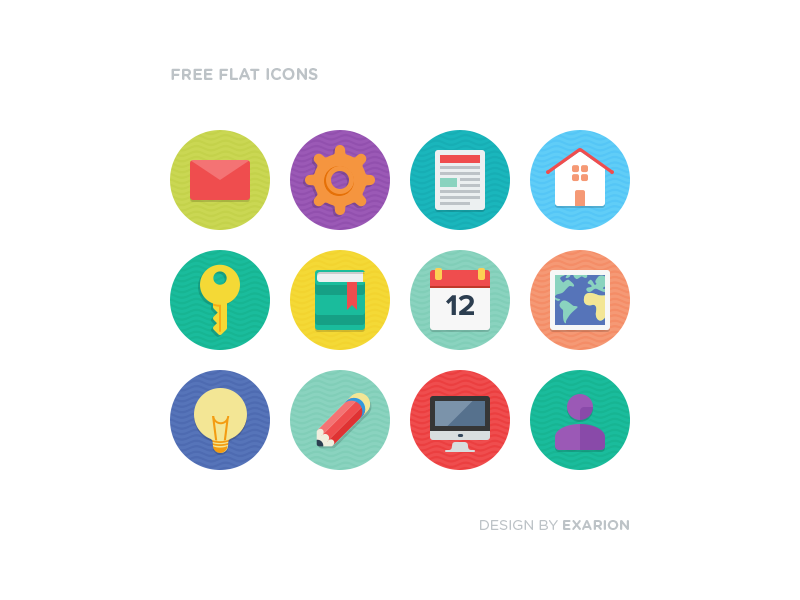
<style>
.page{position:relative;width:800px;height:600px;background:#ffffff}
.page>*{position:absolute;margin:0}
.t1{font:16px "GothamRounded-Bold";color:#bdc3c7;text-transform:uppercase}
.t2{font:14px "GothamRounded-Book";color:#bdc3c7;text-transform:uppercase}
.t3{font:14px "GothamRounded-Bold";color:#bdc3c7;text-transform:uppercase}
</style>
<div class="page">
<p class="t1" style="left:171px;top:68px;width:147px;height:12px">Free flat icons</p>
<p class="t2" style="left:480px;top:520px;width:149px;height:10px">Design by <span class="t3">Exarion</span></p>
</div>
